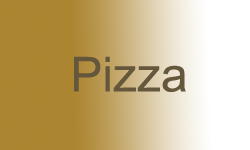
<style>
.page{position:relative;width:250px;height:150px}
.page>*{position:absolute;margin:0}
.t1{font:48px "ArialMT";color:#64573b}
</style>
<div class="page">
<p class="t1" style="left:74px;top:56px;width:112px;height:36px">Pizza</p>
</div>
